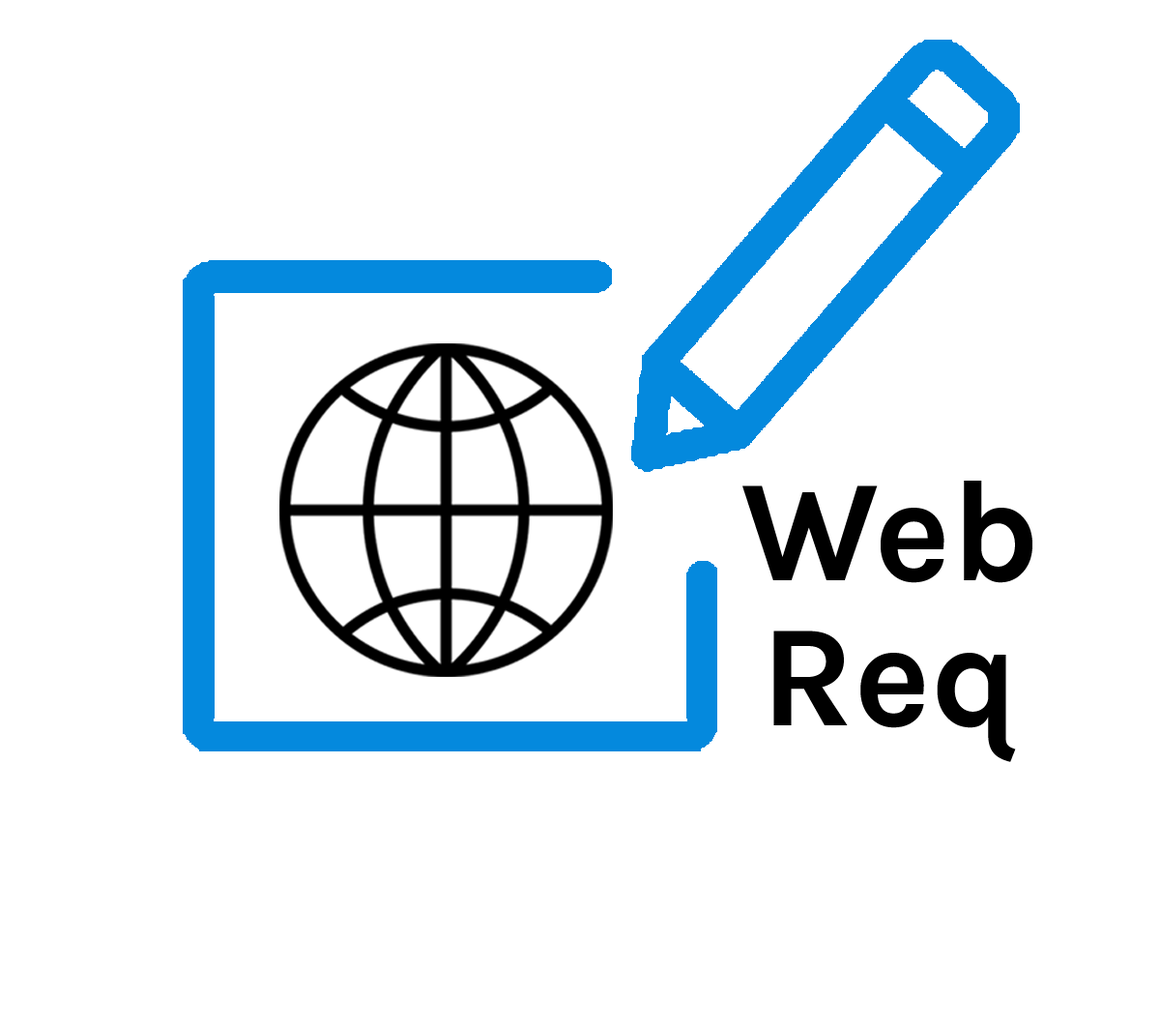
<style>
.page{position:relative;width:1160px;height:1028px;background:#ffffff}
.page>*{position:absolute;margin:0}
.t1{font:145px/145px "Karla-Bold";color:#000000}
</style>
<div class="page">
<p class="t1" style="left:743px;top:481px;width:290px;height:281px;text-align:center">Web<br>Req</p>
</div>
